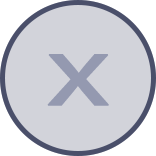
<style>
.page{position:relative;width:156px;height:156px;background:#d2d3da}
.page>*{position:absolute;margin:0}
.t1{font:103.7px "MyriadPro-Regular";letter-spacing:-0.02em;color:#9499b0;font-weight:bold;scale:1.31 1}
</style>
<div class="page">
<p class="t1" style="left:47px;top:54px;width:62px;height:52px">x</p>
</div>
